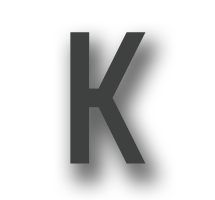
<style>
.page{position:relative;width:215px;height:200px;background:#ffffff}
.page>*{position:absolute;margin:0}
.t1{font:150px "Manteka";color:#3f4040}
</style>
<div class="page">
<p class="t1" style="left:70px;top:32px;width:76px;height:132px">K</p>
</div>
